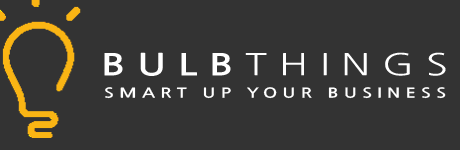
<style>
.page{position:relative;width:460px;height:150px;background:#333333}
.page>*{position:absolute;margin:0}
.t1{font:30px "NanumGothic";letter-spacing:0.295em;color:#ffffff;scale:1.33 1}
.t2{font:30px "NanumGothicBold";letter-spacing:0.295em;color:#ffffff;scale:1.33 1}
.t3{font:30px "NanumGothic";letter-spacing:0.415em;color:#ffffff;scale:1.33 1}
.t4{font:13.5px "NanumGothicBold";letter-spacing:0.295em;color:#ffffff;scale:1.33 1}
</style>
<div class="page">
<p class="t1" style="left:104px;top:52px;width:342px;height:24px"><span class="t2">BULB</span>THING<span class="t3">S</span></p>
<p class="t4" style="left:105px;top:87px;width:341px;height:12px">SMART UP YOUR BUSINESS</p>
</div>
